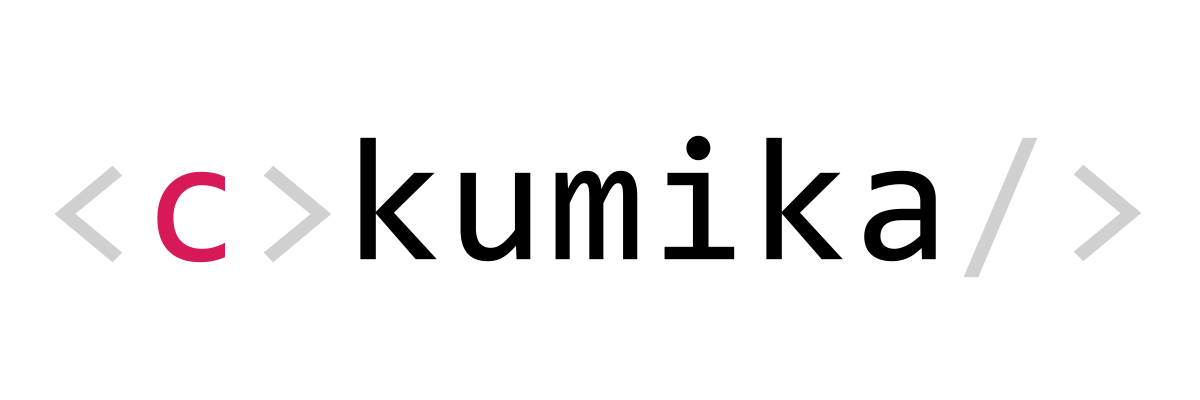
<style>
.page{position:relative;width:1200px;height:400px;background:#ffffff}
.page>*{position:absolute;margin:0}
.t1{font:175.9px "Consolas";color:#000000;font-weight:bold}
.t2{font:175.9px "Consolas";color:#d0d0d0;font-weight:bold}
.t3{font:175.9px "Consolas";color:#d71958;font-weight:bold}
</style>
<div class="page">
<p class="t1" style="left:360px;top:135px;width:782px;height:143px"><span class="t2">&gt;/</span>kumika</p>
<p class="t2" style="left:54px;top:165px;width:278px;height:98px">&gt;<span class="t3">c</span>&lt;</p>
</div>
